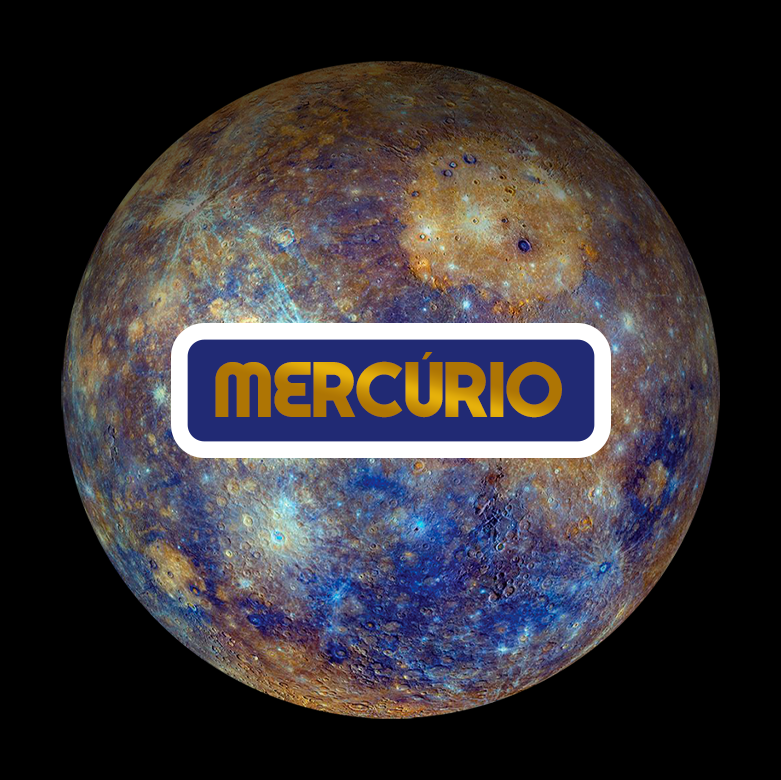
<style>
.page{position:relative;width:781px;height:780px;background:#000000}
.page>*{position:absolute;margin:0}
.t1{font:72.7px "Nowduke-Regular";letter-spacing:0.005em;text-transform:uppercase}
</style>
<div class="page">
<p class="t1" style="left:215px;top:352px;width:347px;height:66px">mercúrio</p>
</div>
